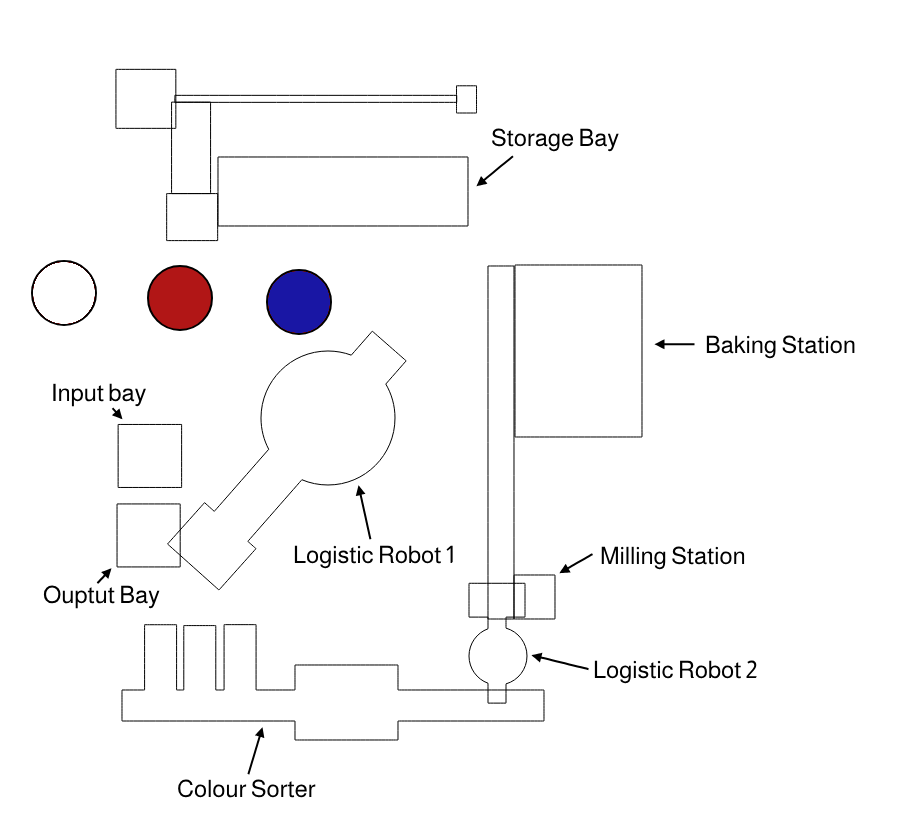
<style>
.page{position:relative;width:905px;height:840px;background:#ffffff}
.page>*{position:absolute;margin:0}
.t1{font:24px "Almarai-Regular";color:#000000}
.t2{font:24px "Almarai-Regular";color:#ffffff}
</style>
<div class="page">
<p class="t1" style="left:492px;top:128px;width:127px;height:24px">Storage Bay</p>
<p class="t1" style="left:706px;top:335px;width:149px;height:24px"><span class="t2">B</span>aking Station</p>
<p class="t1" style="left:53px;top:383px;width:93px;height:24px">Input bay</p>
<p class="t1" style="left:294px;top:545px;width:159px;height:24px">Logistic Robot 1</p>
<p class="t1" style="left:601px;top:546px;width:144px;height:24px">Milling Station</p>
<p class="t1" style="left:43px;top:585px;width:117px;height:24px">Ouptut Bay</p>
<p class="t1" style="left:594px;top:660px;width:163px;height:24px">Logistic Robot 2</p>
<p class="t1" style="left:178px;top:779px;width:138px;height:19px">Colour Sorter</p>
</div>
